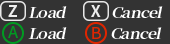
<style>
.page{position:relative;width:170px;height:44px;background:#333333}
.page>*{position:absolute;margin:0}
.t1{font:14.2px "SourceHanSerifCN-Bold";letter-spacing:-0.05em;color:#ffffff;font-style:italic;scale:1.12 1}
</style>
<div class="page">
<p class="t1" style="left:28px;top:6px;width:39px;height:12px">Load</p>
<p class="t1" style="left:112px;top:6px;width:51px;height:12px">Cancel</p>
<p class="t1" style="left:28px;top:27px;width:39px;height:12px">Load</p>
<p class="t1" style="left:111px;top:27px;width:51px;height:12px">Cancel</p>
</div>
